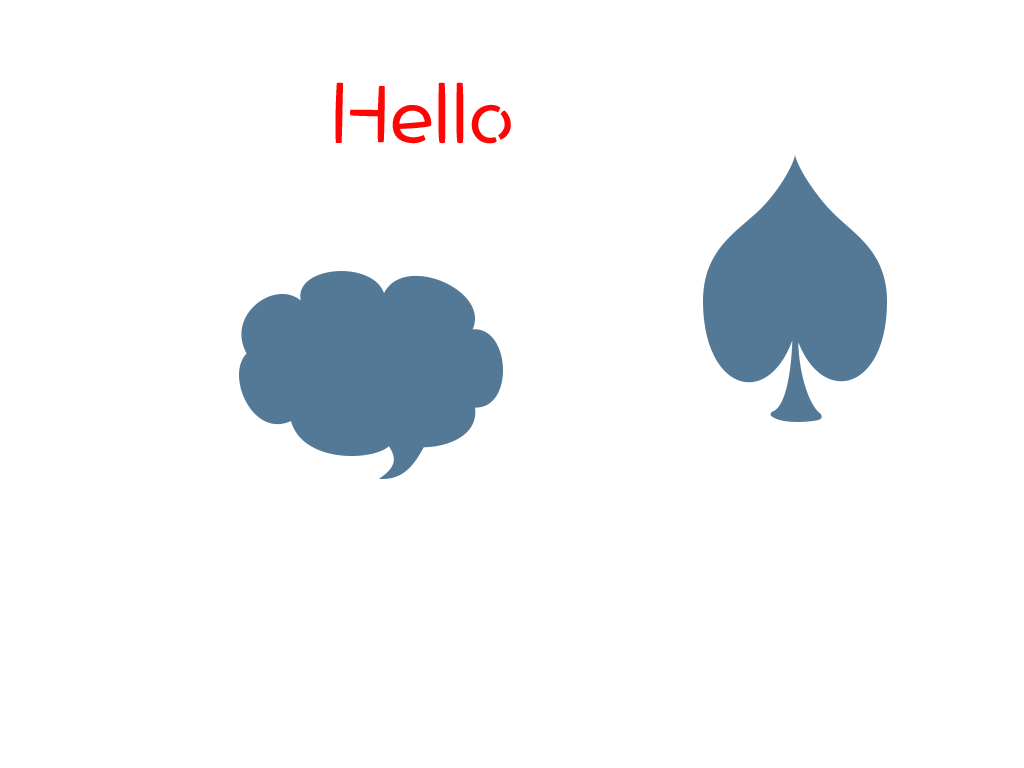
<style>
.page{position:relative;width:1024px;height:768px;background:#ffffff}
.page>*{position:absolute;margin:0}
.t1{font:90px "DFWaWaSC-W5";color:#ff0606}
</style>
<div class="page">
<p class="t1" style="left:335px;top:82px;width:176px;height:62px">Hello</p>
</div>
